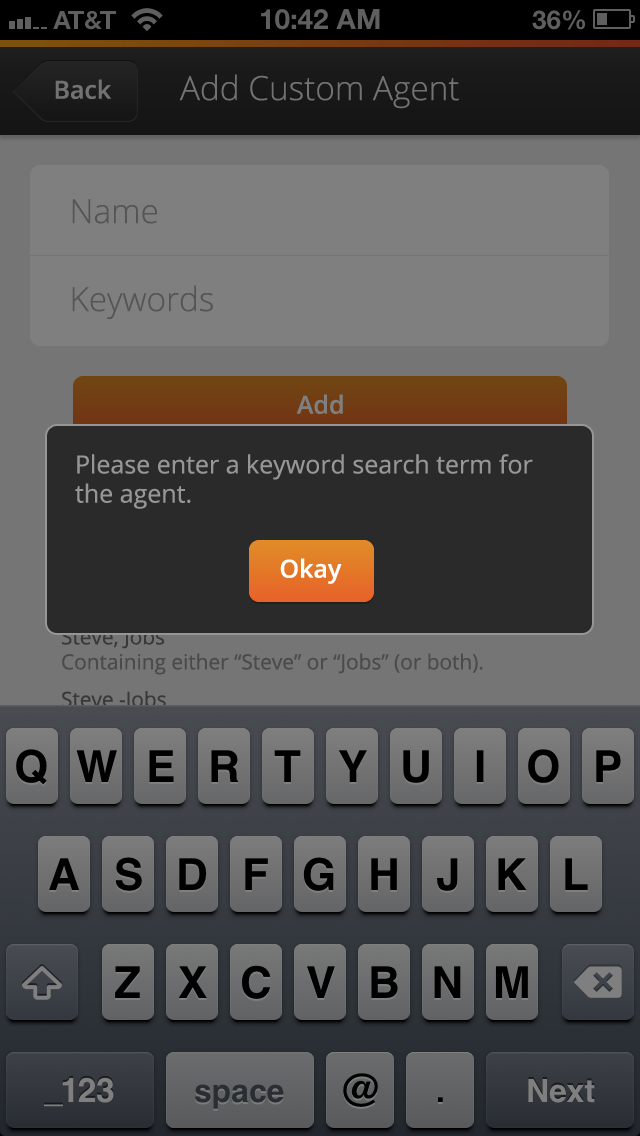
<style>
.page{position:relative;width:640px;height:1136px}
.page>*{position:absolute;margin:0}
.t1{font:33.3px "OpenSans-Light";color:#727272}
.t2{font:25px "OpenSans-Semibold";color:#727272}
.t3{font:33.3px "OpenSans-Light";color:#555555}
.t4{font:25px "OpenSans-Semibold";color:#7f7f7f}
.t5{font:25px/29.2px "OpenSans";color:#969696}
.t6{font:25px "OpenSans-Semibold";color:#ffffff}
</style>
<div class="page">
<p class="t1" style="left:179px;top:74px;width:280px;height:35px">Add Custom Agent</p>
<p class="t2" style="left:55px;top:79px;width:57px;height:20px">Back</p>
<p class="t3" style="left:72px;top:199px;width:85px;height:25px">Name</p>
<p class="t3" style="left:72px;top:285px;width:141px;height:35px">Keywords</p>
<p class="t4" style="left:296px;top:394px;width:47px;height:20px">Add</p>
<p class="t5" style="left:75px;top:454px;width:458px;height:55px">Please enter a keyword search term for the agent.</p>
<p class="t6" style="left:280px;top:558px;width:62px;height:26px">Okay</p>
</div>
